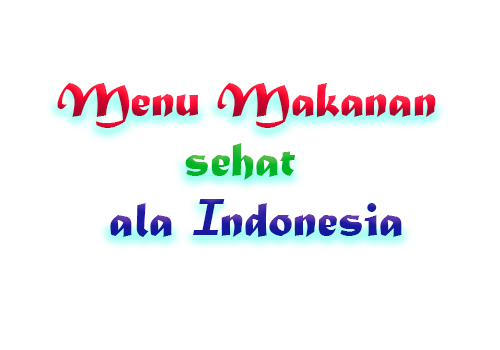
<style>
.page{position:relative;width:500px;height:350px;background:#ffffff}
.page>*{position:absolute;margin:0}
.t1{font:12px "MaturaMTScriptCapitals"}
.t2{font:12px "LucidaSans-TypewriterBoldOblique"}
</style>
<div class="page">
<p class="t1" style="left:57px;top:83px;width:379px;height:154px">Menu Makanan<br>     sehat<br>    ala <span class="t2">I</span>ndonesia</p>
</div>
